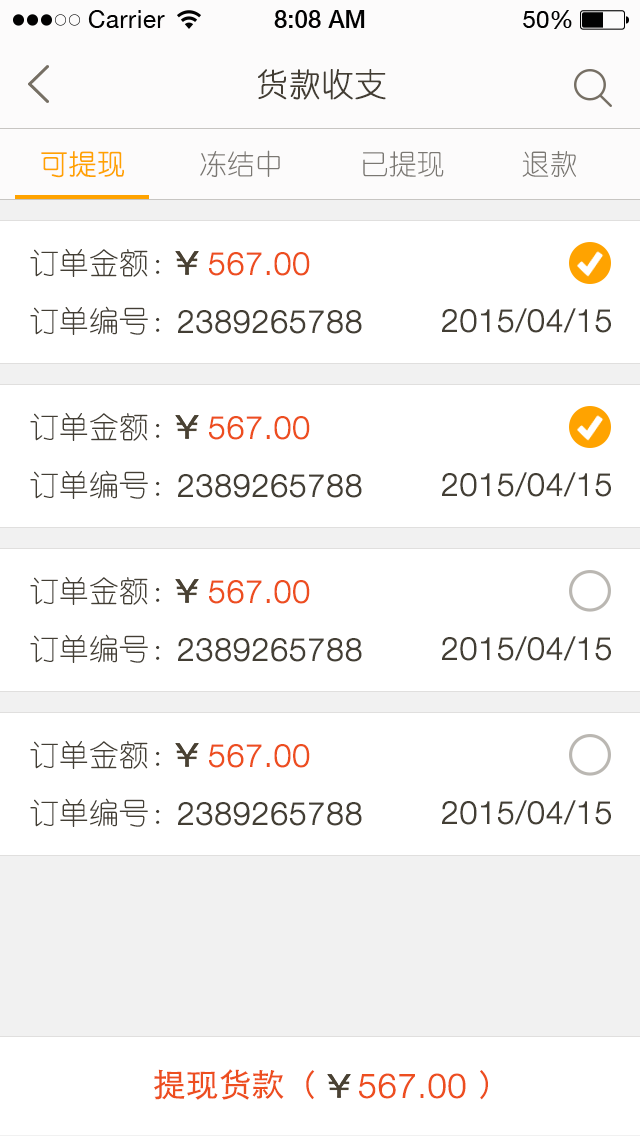
<style>
.page{position:relative;width:640px;height:1136px;background:#ffffff}
.page>*{position:absolute;margin:0}
.t1{font:32px "YouYuan";color:#433d33;text-transform:uppercase;font-weight:bold}
.t2{font:28px "YouYuan";color:#7a7772;text-transform:uppercase}
.t3{font:28px "YouYuan";color:#ffa300;text-transform:uppercase;font-weight:bold}
.t4{font:30px "YouYuan";color:#433e34;text-transform:uppercase}
.t5{font:32px "HelveticaNeueLTPro-Lt";color:#ed4e1f;text-transform:uppercase;font-weight:bold}
.t6{font:32px "HelveticaNeueLTPro-Lt";color:#433e34;text-transform:uppercase;font-weight:bold}
.t7{font:32px "STHeitiSC-Light";color:#ed4e1f;text-transform:uppercase;font-weight:bold}
.t8{font:34px "HelveticaNeueLTPro-Lt";color:#ed4e1f;text-transform:uppercase;font-weight:bold}
</style>
<div class="page">
<p class="t1" style="left:258px;top:69px;width:128px;height:31px">货款收支</p>
<p class="t2" style="left:200px;top:150px;width:80px;height:27px">冻结中</p>
<p class="t3" style="left:41px;top:151px;width:83px;height:27px">可提现</p>
<p class="t2" style="left:363px;top:151px;width:81px;height:26px">已提现</p>
<p class="t2" style="left:522px;top:151px;width:54px;height:26px">退款</p>
<p class="t4" style="left:30px;top:249px;width:130px;height:28px">订单金额：</p>
<p class="t5" style="left:209px;top:252px;width:101px;height:24px">567.00</p>
<p class="t4" style="left:30px;top:306px;width:130px;height:29px">订单编号：</p>
<p class="t6" style="left:178px;top:310px;width:184px;height:24px">2389265788</p>
<p class="t6" style="left:442px;top:308px;width:169px;height:25px">2015/04/15</p>
<p class="t4" style="left:30px;top:413px;width:130px;height:28px">订单金额：</p>
<p class="t5" style="left:209px;top:416px;width:101px;height:24px">567.00</p>
<p class="t4" style="left:30px;top:470px;width:130px;height:29px">订单编号：</p>
<p class="t6" style="left:442px;top:472px;width:169px;height:25px">2015/04/15</p>
<p class="t6" style="left:178px;top:474px;width:184px;height:24px">2389265788</p>
<p class="t4" style="left:30px;top:577px;width:130px;height:28px">订单金额：</p>
<p class="t5" style="left:209px;top:580px;width:101px;height:24px">567.00</p>
<p class="t4" style="left:30px;top:634px;width:130px;height:29px">订单编号：</p>
<p class="t6" style="left:178px;top:638px;width:184px;height:24px">2389265788</p>
<p class="t6" style="left:442px;top:636px;width:169px;height:25px">2015/04/15</p>
<p class="t4" style="left:30px;top:741px;width:130px;height:28px">订单金额：</p>
<p class="t5" style="left:209px;top:744px;width:101px;height:24px">567.00</p>
<p class="t4" style="left:30px;top:798px;width:130px;height:29px">订单编号：</p>
<p class="t6" style="left:178px;top:802px;width:184px;height:24px">2389265788</p>
<p class="t6" style="left:442px;top:800px;width:169px;height:25px">2015/04/15</p>
<p class="t7" style="left:154px;top:1069px;width:334px;height:31px">提现货款（                  ）</p>
<p class="t8" style="left:359px;top:1073px;width:107px;height:26px">567.00</p>
</div>
